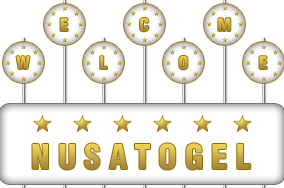
<style>
.page{position:relative;width:284px;height:188px;background:#ffffff}
.page>*{position:absolute;margin:0}
.t1{font:17.1px "Helvetica-Condensed-Black";letter-spacing:0.08em;text-transform:uppercase}
.t2{font:33.3px "Helvetica-Condensed-Black";letter-spacing:0.24em;text-transform:uppercase}
</style>
<div class="page">
<p class="t1" style="left:60px;top:18px;width:8px;height:13px">E</p>
<p class="t1" style="left:218px;top:18px;width:13px;height:13px">M</p>
<p class="t1" style="left:100px;top:56px;width:7px;height:13px">L</p>
<p class="t1" style="left:179px;top:56px;width:9px;height:14px">o</p>
<p class="t1" style="left:259px;top:56px;width:8px;height:13px">E</p>
<p class="t2" style="left:32px;top:143px;width:219px;height:27px">NUSAtogel</p>
</div>
